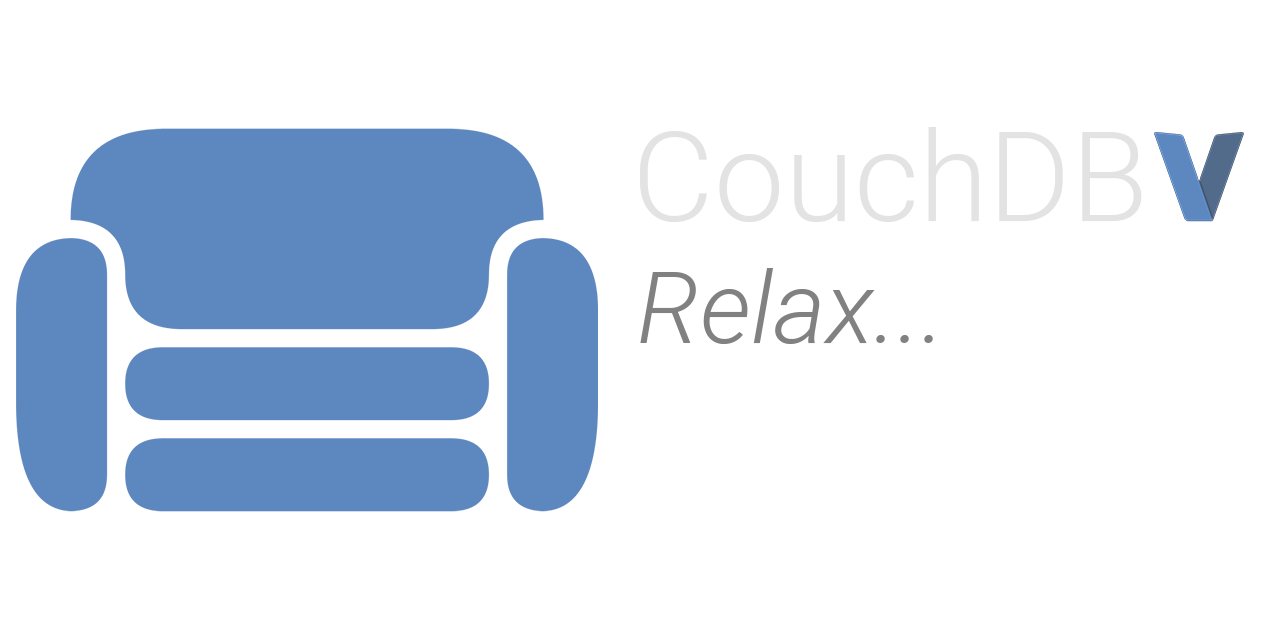
<style>
.page{position:relative;width:1280px;height:640px;background:#ffffff}
.page>*{position:absolute;margin:0}
.t1{font:125px "Roboto-Light";color:#e3e3e3}
.t2{font:100px "Roboto-LightItalic";color:#818181}
</style>
<div class="page">
<p class="t1" style="left:640px;top:127px;width:502px;height:95px">CouchDB</p>
<p class="t2" style="left:640px;top:268px;width:293px;height:76px">Relax...</p>
</div>
